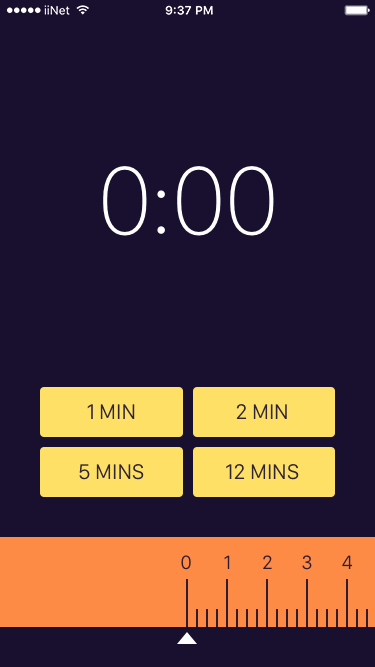
<style>
.page{position:relative;width:375px;height:667px;background:#191030}
.page>*{position:absolute;margin:0}
.t1{font:100px "SanFranciscoDisplay-Thin";color:#ffffff}
.t2{font:22px "SanFranciscoDisplay-Regular";color:#2f2435;text-transform:uppercase}
.t3{font:20px "SanFranciscoDisplay-Regular";color:#2f1c32}
</style>
<div class="page">
<p class="t1" style="left:103px;top:166px;width:171px;height:70px">0:00</p>
<p class="t2" style="left:87px;top:404px;width:48px;height:15px">1 min</p>
<p class="t2" style="left:236px;top:404px;width:51px;height:15px">2 min</p>
<p class="t2" style="left:79px;top:464px;width:65px;height:16px">5 mins</p>
<p class="t2" style="left:226px;top:464px;width:73px;height:16px">12 mins</p>
<p class="t3" style="left:181px;top:555px;width:10px;height:15px">0</p>
<p class="t3" style="left:224px;top:555px;width:6px;height:14px">1</p>
<p class="t3" style="left:263px;top:555px;width:9px;height:14px">2</p>
<p class="t3" style="left:302px;top:555px;width:10px;height:15px">3</p>
<p class="t3" style="left:342px;top:555px;width:11px;height:14px">4</p>
</div>
